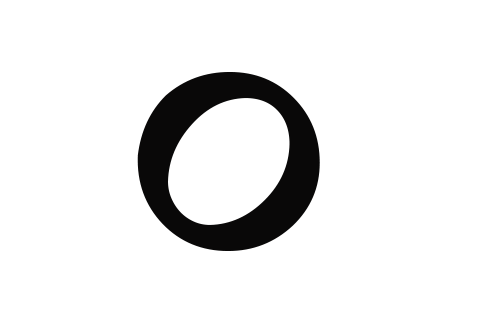
<style>
.page{position:relative;width:480px;height:320px;background:#ffffff}
.page>*{position:absolute;margin:0}
.t1{font:401.4px "KalpurushANSI";color:#090808}
</style>
<div class="page">
<p class="t1" style="left:137px;top:72px;width:183px;height:179px">0</p>
</div>
